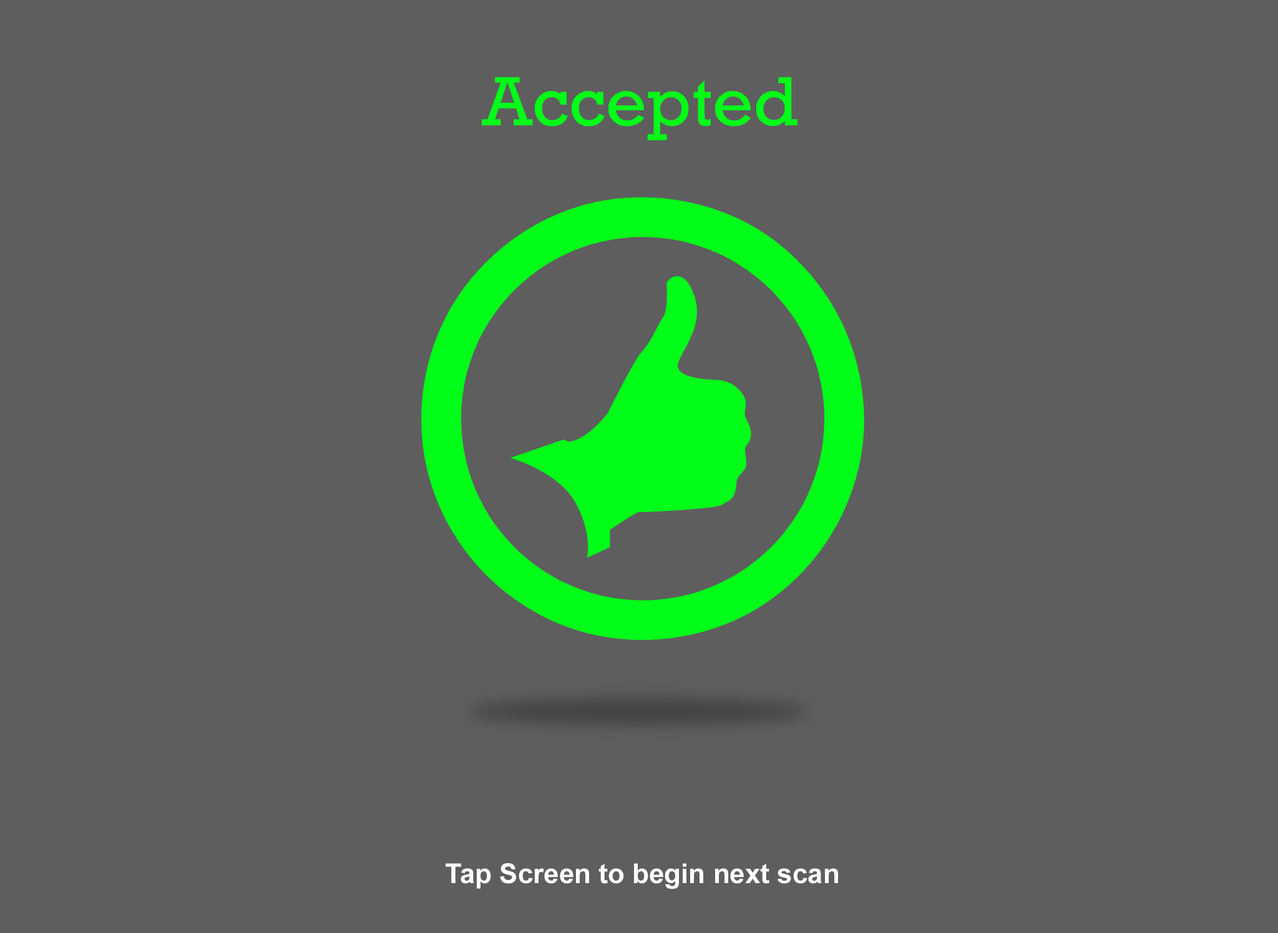
<style>
.page{position:relative;width:1278px;height:933px;background:#5e5e5e}
.page>*{position:absolute;margin:0}
.t1{font:71px "Rockwell";color:#00ff18}
.t2{font:27.4px "Arial-BoldMT";color:#ffffff}
</style>
<div class="page">
<p class="t1" style="left:482px;top:77px;width:315px;height:63px">Accepted</p>
<p class="t2" style="left:445px;top:863px;width:393px;height:27px">Tap Screen to begin next scan</p>
</div>
